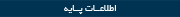
<style>
.page{position:relative;width:180px;height:17px;background:#003351}
.page>*{position:absolute;margin:0}
.t1{font:10px "BYekan";color:#ffffff}
</style>
<div class="page">
<p class="t1" style="left:64px;top:5px;width:52px;height:9px">اطلاعــات پــایه</p>
</div>
